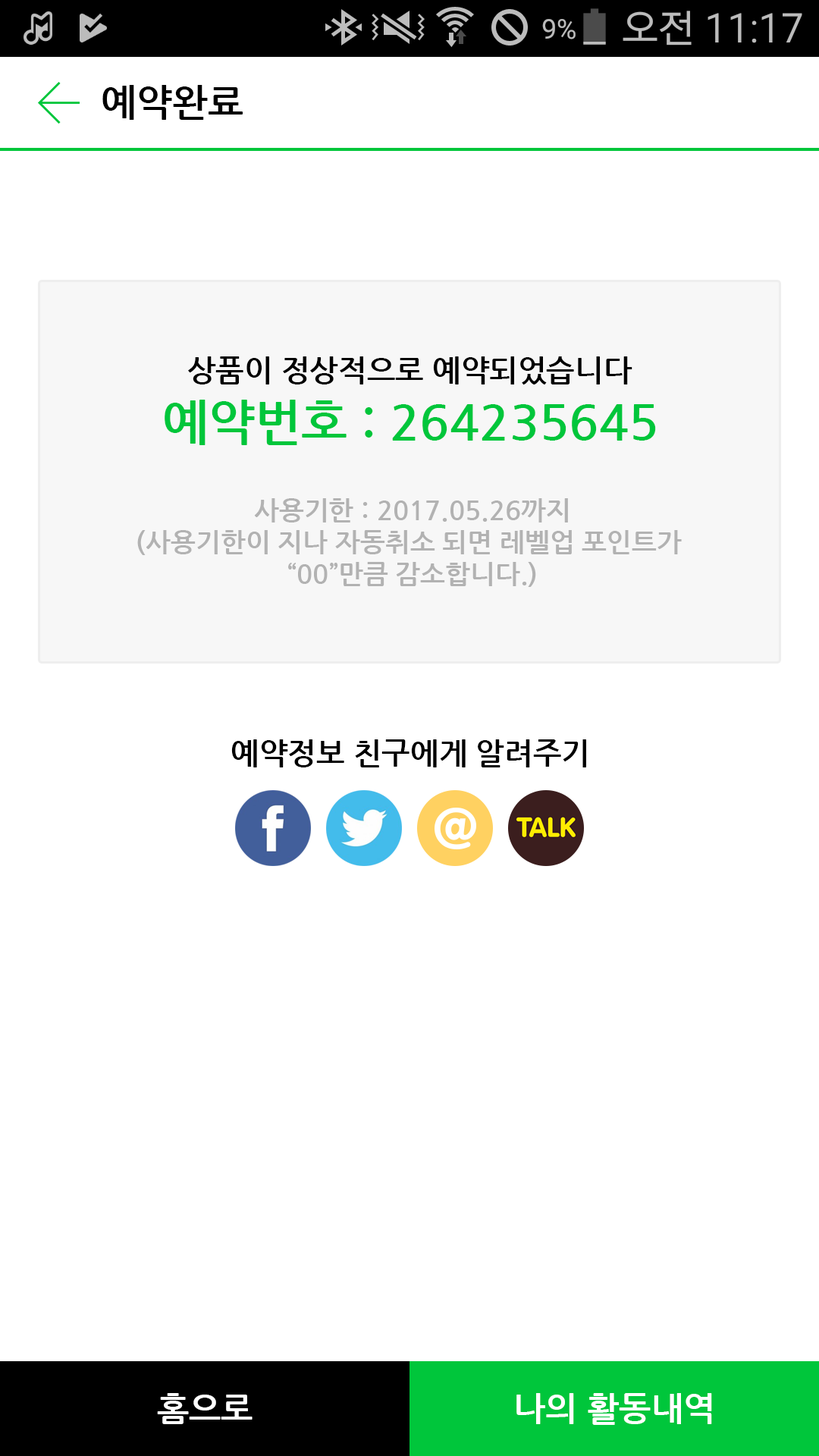
<style>
.page{position:relative;width:819px;height:1456px;background:#ffffff}
.page>*{position:absolute;margin:0}
.t1{font:37.9px "NanumGothicBold";color:#000000}
.t2{font:30.3px "NanumGothicBold";color:#000000}
.t3{font:49.3px "NanumGothicBold";color:#00c63b}
.t4{font:26.5px "NanumGothicBold";color:#b2b2b2}
.t5{font:34.1px "NanumGothicBold";color:#ffffff}
</style>
<div class="page">
<p class="t1" style="left:102px;top:85px;width:141px;height:35px">예약완료</p>
<p class="t2" style="left:188px;top:356px;width:444px;height:29px">상품이 정상적으로 예약되었습니다</p>
<p class="t3" style="left:165px;top:400px;width:491px;height:45px">예약번호 : 264235645</p>
<p class="t4" style="left:137px;top:498px;width:545px;height:89px;text-align:center">사용기한 : 2017.05.26까지<br>(사용기한이 지나 자동취소 되면 레벨업 포인트가 <br>“00”만큼 감소합니다.)</p>
<p class="t2" style="left:231px;top:739px;width:355px;height:28px">예약정보 친구에게 알려주기</p>
<p class="t5" style="left:157px;top:1393px;width:96px;height:31px">홈으로</p>
<p class="t5" style="left:516px;top:1393px;width:196px;height:32px">나의 활동내역</p>
</div>
